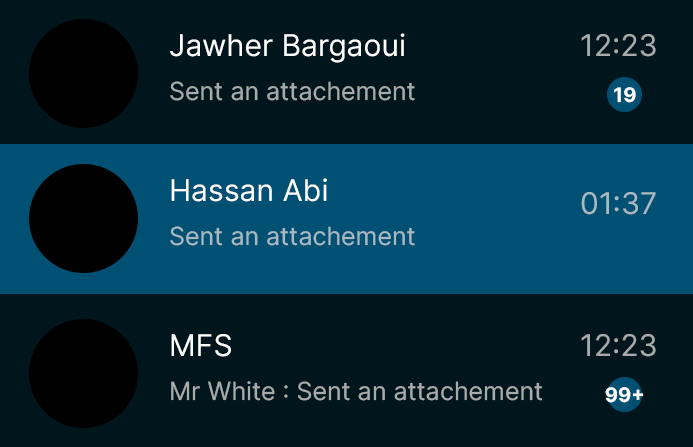
<style>
.page{position:relative;width:693px;height:447px;background:#00161c}
.page>*{position:absolute;margin:0}
.t1{font:30px "Inter-Regular";color:#ffffff}
.t2{font:30px "Inter-Regular";color:#a8abac}
.t3{font:25px "Inter-Regular";color:#a8abac}
.t4{font:20px "Inter-Bold";color:#ffffff}
.t5{font:30px "Inter-Regular";color:#a8b9c4}
.t6{font:25px "Inter-Regular";color:#a8b9c4}
</style>
<div class="page">
<p class="t1" style="left:170px;top:33px;width:235px;height:30px">Jawher Bargaoui</p>
<p class="t2" style="left:581px;top:34px;width:75px;height:23px">12:23</p>
<p class="t3" style="left:170px;top:81px;width:245px;height:20px">Sent an attachement</p>
<p class="t4" style="left:614px;top:87px;width:22px;height:16px">19</p>
<p class="t1" style="left:171px;top:178px;width:156px;height:24px">Hassan Abi</p>
<p class="t5" style="left:581px;top:192px;width:75px;height:23px">01:37</p>
<p class="t6" style="left:170px;top:226px;width:245px;height:20px">Sent an attachement</p>
<p class="t1" style="left:171px;top:334px;width:60px;height:23px">MFS</p>
<p class="t2" style="left:581px;top:334px;width:75px;height:23px">12:23</p>
<p class="t3" style="left:171px;top:381px;width:372px;height:20px">Mr White : Sent an attachement</p>
<p class="t4" style="left:605px;top:387px;width:39px;height:16px">99+</p>
</div>
